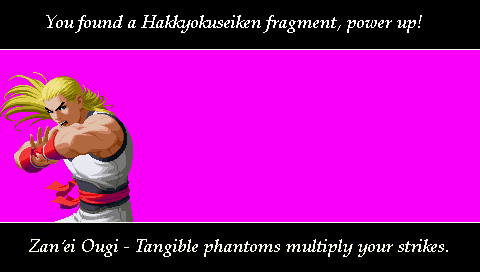
<style>
.page{position:relative;width:480px;height:272px;background:#f800f8}
.page>*{position:absolute;margin:0}
.t1{font:18px "PalatinoLinotype-Italic";color:#ffffff}
.t2{font:18px "PalatinoLinotype-Italic";color:#f8f8e8}
</style>
<div class="page">
<p class="t1" style="left:46px;top:15px;width:376px;height:18px">You found a Hakkyokuseiken fragment, power up!</p>
<p class="t2" style="left:29px;top:239px;width:419px;height:18px">Zan’ei Ougi - Tangible phantoms multiply your strikes.</p>
</div>
